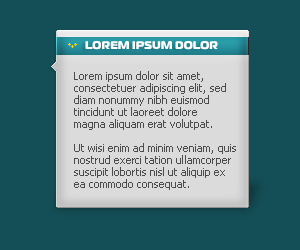
<style>
.page{position:relative;width:300px;height:250px;background:#144e56}
.page>*{position:absolute;margin:0}
.t1{font:11px "MagistralBlackC";color:#ffffff;text-transform:uppercase}
.t2{font:11px/12px "Tahoma";color:#4c4c4c}
</style>
<div class="page">
<p class="t1" style="left:85px;top:41px;width:133px;height:9px">lorem ipsum dolor</p>
<p class="t2" style="left:74px;top:71px;width:162px;height:119px">Lorem ipsum dolor sit amet, <br>consectetuer adipiscing elit, sed <br>diam nonummy nibh euismod <br>tincidunt ut laoreet dolore <br>magna aliquam erat volutpat. <br><br>Ut wisi enim ad minim veniam, quis <br>nostrud exerci tation ullamcorper <br>suscipit lobortis nisl ut aliquip ex <br>ea commodo consequat.</p>
</div>
